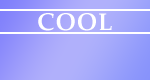
<style>
.page{position:relative;width:150px;height:80px}
.page>*{position:absolute;margin:0}
.t1{font:24px "PalatinoLinotype-Bold";letter-spacing:0.05em;color:#ffffff}
</style>
<div class="page">
<p class="t1" style="left:38px;top:13px;width:74px;height:18px">COOL</p>
</div>
